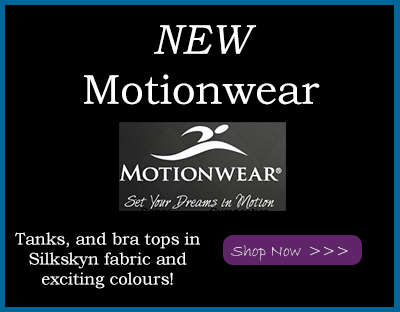
<style>
.page{position:relative;width:400px;height:312px;background:#000000}
.page>*{position:absolute;margin:0}
.t1{font:41.7px "BookmanOldStyle";color:#ffffff}
.t2{font:41.7px "BookmanOldStyle-Italic";color:#ffffff}
.t3{font:16.7px "BookmanOldStyle";color:#ffffff}
.t4{font:16.7px "BradleyHandITC";color:#ffffff}
.t5{font:16.7px "BradleyHandITC"}
</style>
<div class="page">
<p class="t1" style="left:84px;top:25px;width:236px;height:80px;text-align:center"><span class="t2">NEW <br></span>Motionwear</p>
<p class="t3" style="left:15px;top:232px;width:185px;height:57px;text-align:center">Tanks, and bra tops in Silkskyn fabric and exciting colours!</p>
<p class="t4" style="left:231px;top:245px;width:70px;height:16px">Shop Now</p>
<p class="t5" style="left:310px;top:246px;width:38px;height:10px">&gt;&gt;&gt;</p>
</div>
